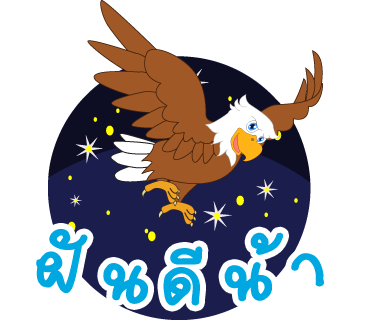
<style>
.page{position:relative;width:370px;height:320px;background:#ffffff}
.page>*{position:absolute;margin:0}
.t1{font:105px "2005_iannnnnMTV";letter-spacing:0.075em;color:#00a8e1;scale:1.06 1}
</style>
<div class="page">
<p class="t1" style="left:36px;top:229px;width:288px;height:77px">ฝันดีน้า</p>
</div>
